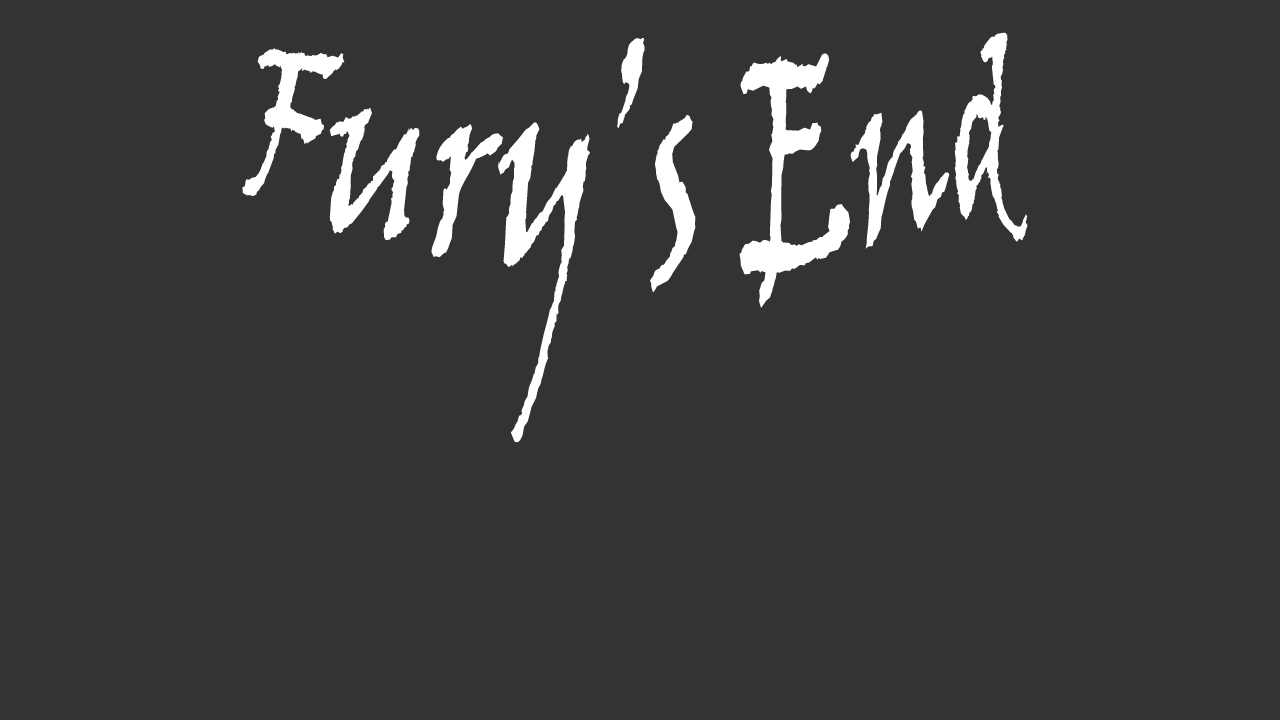
<style>
.page{position:relative;width:1280px;height:720px;background:#333333}
.page>*{position:absolute;margin:0}
.t1{font:150px "VinerHandITC";color:#ffffff}
</style>
<div class="page">
<p class="t1" style="left:242px;top:32px;width:786px;height:411px;text-align:center">Fury’s End</p>
</div>
